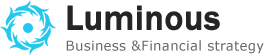
<style>
.page{position:relative;width:276px;height:55px;background:#ffffff}
.page>*{position:absolute;margin:0}
.t1{font:35.2px "FranklinGothic-Medium";color:#252525;font-weight:bold}
.t2{font:13.2px "Verdana";letter-spacing:0.02em;color:#666666}
</style>
<div class="page">
<p class="t1" style="left:67px;top:5px;width:153px;height:26px">Luminous</p>
<p class="t2" style="left:66px;top:40px;width:198px;height:14px">Business &amp;Financial strategy</p>
</div>
